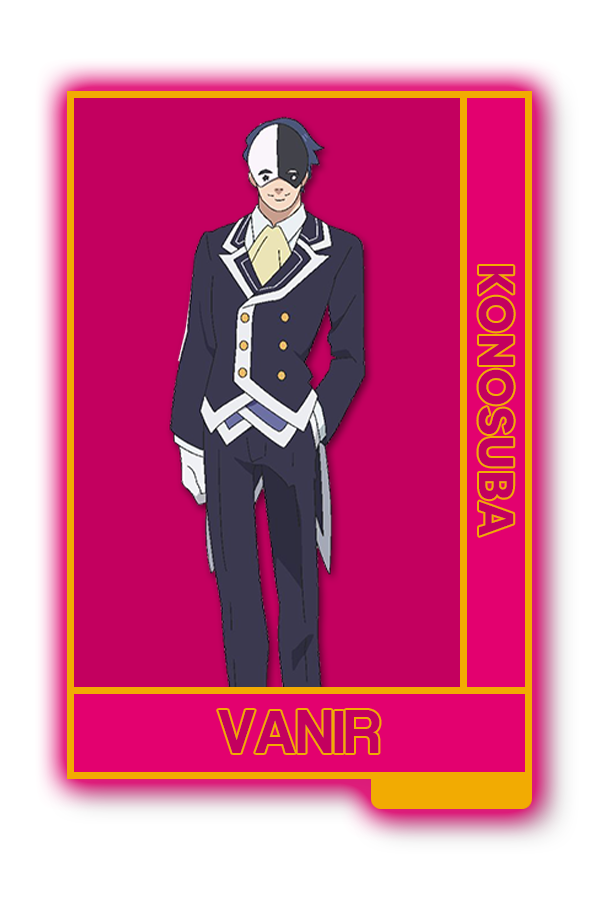
<style>
.page{position:relative;width:600px;height:900px;background:#c3005f}
.page>*{position:absolute;margin:0}
.t1{font:48.8px "MADETOMMY-Bold";color:#c3005f}
.t2{font:62.7px "CoolveticaRg-Regular";color:#c3005f}
</style>
<div class="page">
<p class="t1" style="left:478px;top:266px;width:36px;height:270px;rotate:90deg">KONOSUBA</p>
<p class="t2" style="left:218px;top:710px;width:162px;height:43px">VANIR</p>
</div>
